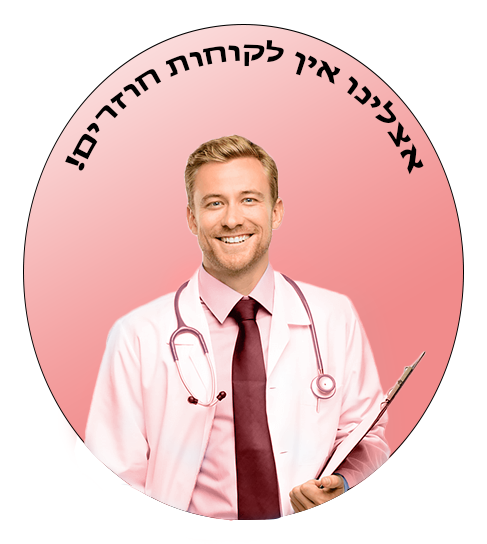
<style>
.page{position:relative;width:487px;height:544px;background:#ffffff}
.page>*{position:absolute;margin:0}
.t1{font:28.8px "MyriadHebrew-Bold";color:#000000}
</style>
<div class="page">
<p class="t1" style="left:65px;top:40px;width:359px;height:135px;text-align:center">אצלינו אין לקוחות חוזרים!</p>
</div>
